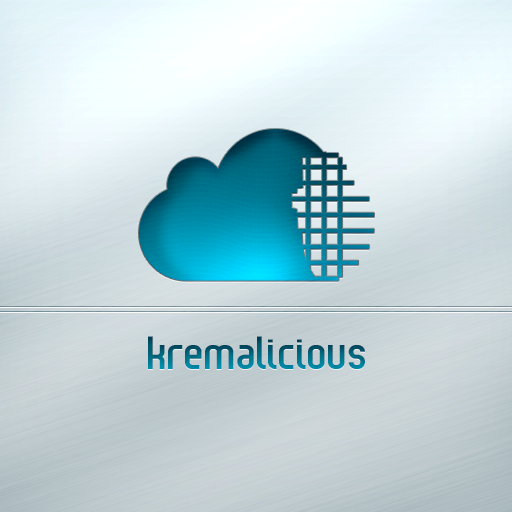
<style>
.page{position:relative;width:512px;height:512px}
.page>*{position:absolute;margin:0}
.t1{font:34.7px "Reflex-Bold";scale:1.18 1}
</style>
<div class="page">
<p class="t1" style="left:148px;top:336px;width:217px;height:33px">kremalicious</p>
</div>
